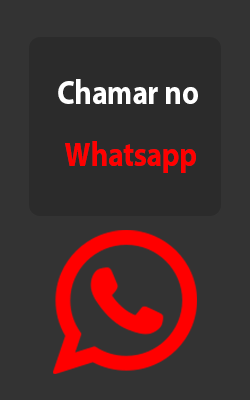
<style>
.page{position:relative;width:250px;height:400px;background:#333333}
.page>*{position:absolute;margin:0}
.t1{font:34.1px/62.5px "MyriadHebrew-Bold";color:#ffffff;scale:0.85 1}
.t2{font:34.1px/62.5px "MyriadHebrew-Bold";color:#ff0000;scale:0.85 1}
</style>
<div class="page">
<p class="t1" style="left:58px;top:79px;width:140px;height:94px;text-align:center">Chamar no <br><span class="t2">Whatsapp</span></p>
</div>
